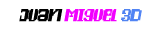
<style>
.page{position:relative;width:160px;height:30px;background:#ffffff}
.page>*{position:absolute;margin:0}
.t1{font:18px "Pixelfy";color:#f200ff;font-style:italic}
.t2{font:18px "Pixelfy";color:#000000;font-style:italic}
.t3{font:18px "Pixelfy";color:#5083f1;font-style:italic}
.t4{font:18px "Pixelfy";color:#5184f4;font-style:italic}
</style>
<div class="page">
<p class="t1" style="left:19px;top:9px;width:123px;height:13px"><span class="t2">Juan </span>miguel <span class="t3">3</span><span class="t4">D</span></p>
</div>
